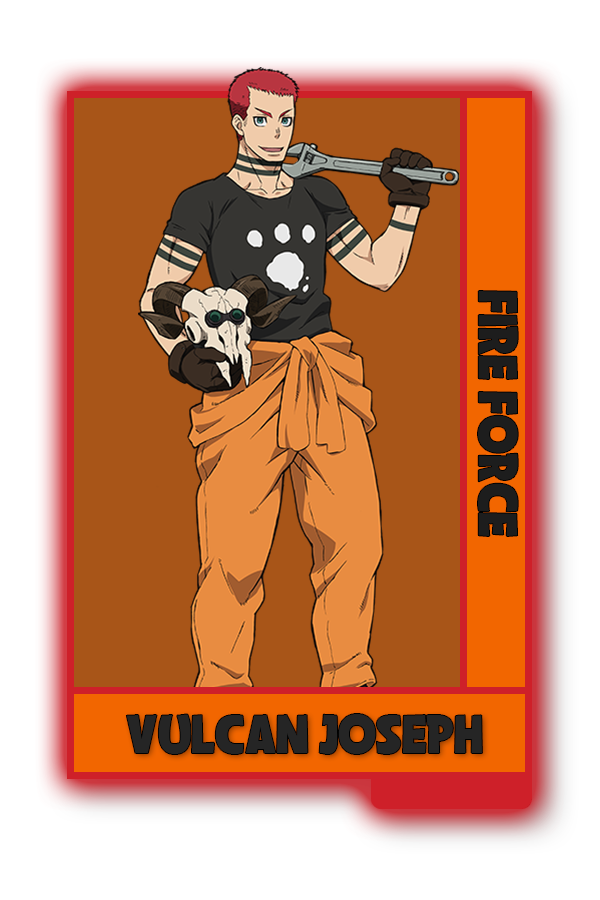
<style>
.page{position:relative;width:600px;height:900px;background:#a85518}
.page>*{position:absolute;margin:0}
.t1{font:69.6px "AristonComicDemo-Regular";color:#1d1d1d}
.t2{font:69.1px "AristonComicDemo-Regular";color:#252525}
</style>
<div class="page">
<p class="t1" style="left:478px;top:291px;width:40px;height:245px;rotate:90deg">FIRE FORCE</p>
<p class="t2" style="left:126px;top:714px;width:356px;height:40px">VULCAN JOSEPH</p>
</div>
